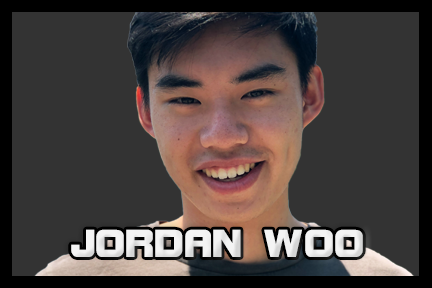
<style>
.page{position:relative;width:432px;height:288px;background:#333333}
.page>*{position:absolute;margin:0}
.t1{font:41.7px "BolsterBold";color:#f3f3f3}
</style>
<div class="page">
<p class="t1" style="left:71px;top:229px;width:292px;height:28px">JORDAN WOO</p>
</div>
